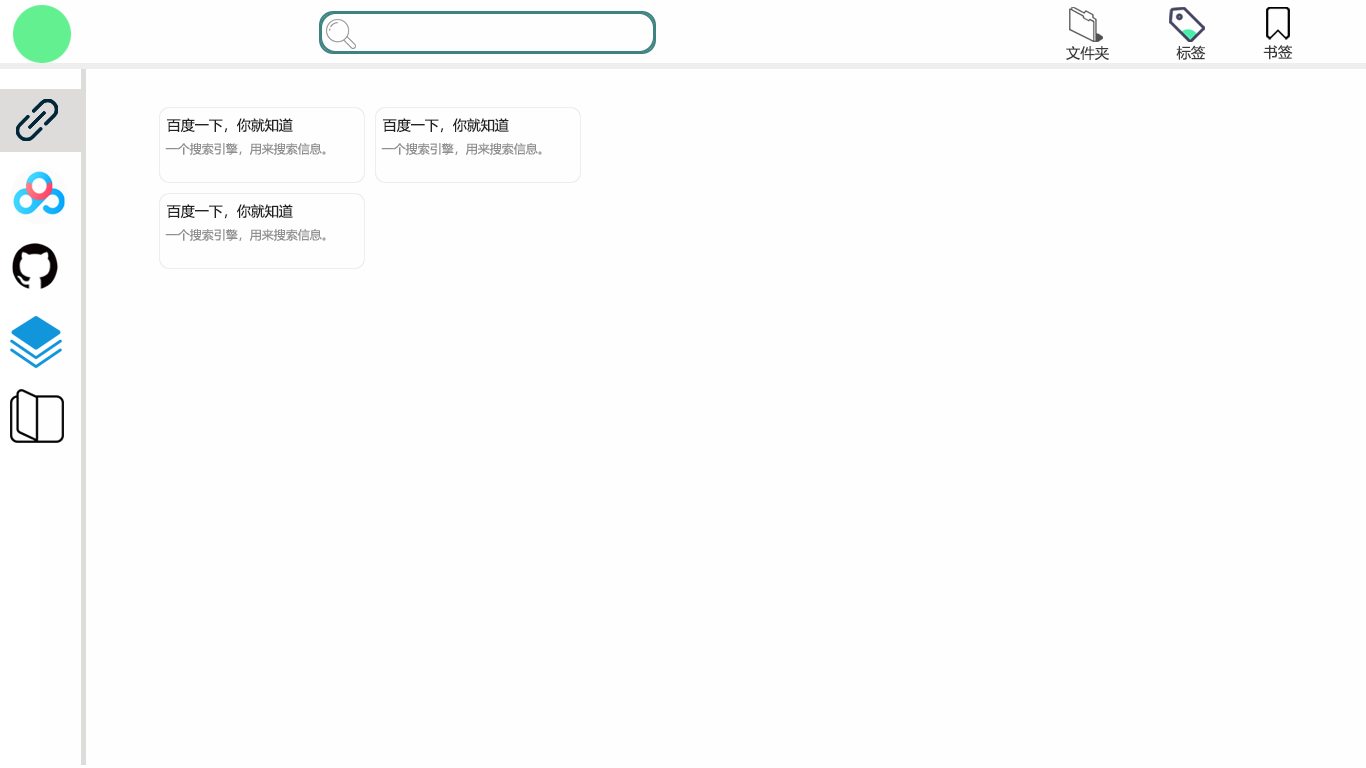
<style>
.page{position:relative;width:1366px;height:768px;background:#fefefe}
.page>*{position:absolute;margin:0}
.t1{font:14.4px "MicrosoftYaHei";color:#3a3a3a}
.t2{font:14px "MicrosoftYaHei";color:#222222}
.t3{font:12px "MicrosoftYaHei";color:#8f8f8f}
</style>
<div class="page">
<p class="t1" style="left:1066px;top:46px;width:43px;height:15px">文件夹</p>
<p class="t1" style="left:1176px;top:45px;width:30px;height:15px">标签</p>
<p class="t1" style="left:1263px;top:45px;width:30px;height:15px">书签</p>
<p class="t2" style="left:167px;top:118px;width:126px;height:15px">百度一下，你就知道</p>
<p class="t2" style="left:383px;top:118px;width:126px;height:15px">百度一下，你就知道</p>
<p class="t3" style="left:165px;top:143px;width:161px;height:12px">一个搜索引擎，用来搜索信息。</p>
<p class="t3" style="left:381px;top:143px;width:161px;height:12px">一个搜索引擎，用来搜索信息。</p>
<p class="t2" style="left:167px;top:204px;width:126px;height:15px">百度一下，你就知道</p>
<p class="t3" style="left:165px;top:229px;width:161px;height:12px">一个搜索引擎，用来搜索信息。</p>
</div>
